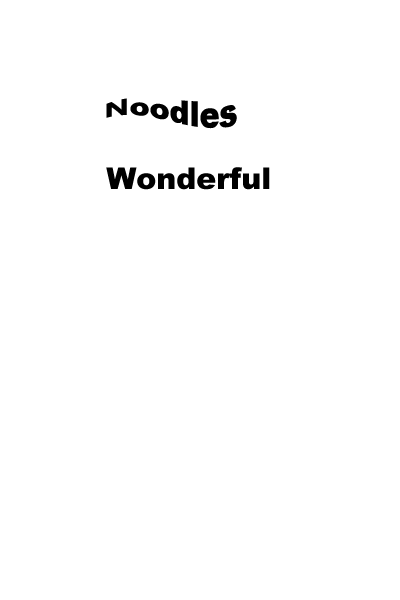
<style>
.page{position:relative;width:400px;height:600px;background:#ffffff}
.page>*{position:absolute;margin:0}
.t1{font:30px "Arial-Black";color:#000000}
</style>
<div class="page">
<p class="t1" style="left:106px;top:98px;width:131px;height:31px">Noodles</p>
<p class="t1" style="left:106px;top:167px;width:164px;height:23px">Wonderful</p>
</div>
